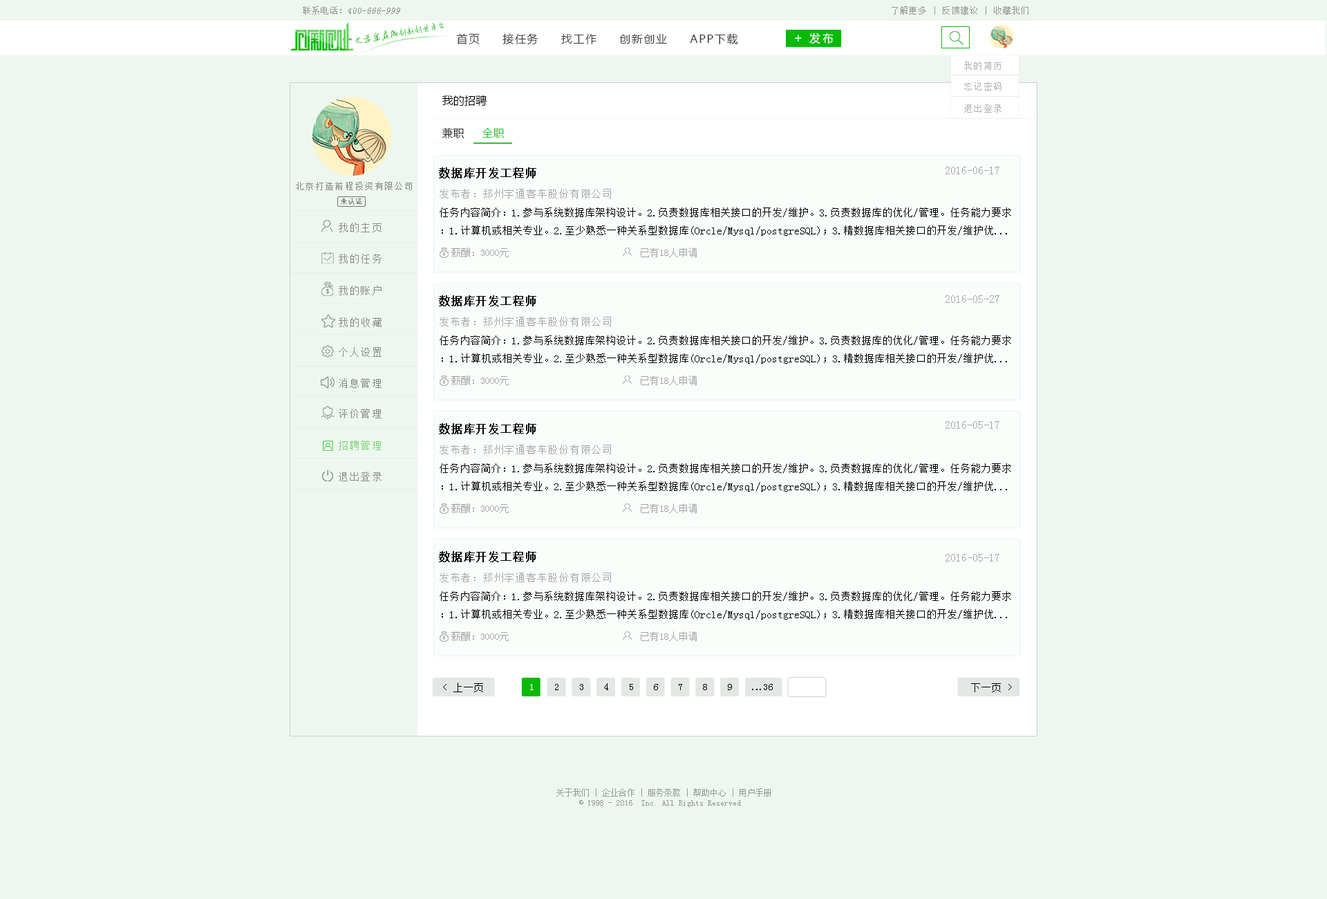
<style>
.page{position:relative;width:1327px;height:899px;background:#eef6f0}
.page>*{position:absolute;margin:0}
.t1{font:9.2px "SimSun";color:#959595;font-style:italic}
.t2{font:9.2px "SimSun";color:#959595}
.t3{font:8.3px "SimSun";letter-spacing:0.1em;color:#959494}
.t4{font:8.6px "AnJingCheng-Xing-2.0";letter-spacing:-0.01em;color:#09ba08}
.t5{font:9.6px "AnJingCheng-Xing-2.0";letter-spacing:-0.01em;color:#09ba08}
.t6{font:11.1px "MicrosoftYaHei";letter-spacing:0.1em;color:#3e3e3e}
.t7{font:12.9px "MicrosoftYaHei";letter-spacing:0.2em;color:#ffffff}
.t8{font:11.1px "MicrosoftYaHei";letter-spacing:0.2em;color:#ffffff}
.t9{font:9.2px "SimSun";letter-spacing:0.1em;color:#b2b2b2}
.t10{font:11.1px "MicrosoftYaHei";letter-spacing:0.01em;color:#000000}
.t11{font:11.1px "MicrosoftYaHei";letter-spacing:0.01em;color:#2f2f2f}
.t12{font:11.1px "MicrosoftYaHei";letter-spacing:0.01em;color:#33c132}
.t13{font:11.1px "SimSun";letter-spacing:0.05em;color:#030303;font-weight:bold}
.t14{font:11.1px "SimSun";color:#a4a4a4}
.t15{font:9.2px "SimSun";letter-spacing:0.1em;color:#888888}
.t16{font:7.4px "SimSun";color:#727472}
.t17{font:10.1px "SimSun";letter-spacing:0.05em;color:#a4a4a4}
.t18{font:10.1px "SimSun";color:#000000}
.t19{font:10.1px "SimSun";letter-spacing:0.1em;color:#888888}
.t20{font:9.7px "SimSun";color:#a4a4a4}
.t21{font:10.1px "SimSun";letter-spacing:0.1em;color:#7bd57b}
.t22{font:10px "SimSun";letter-spacing:0.05em;color:#000000}
.t23{font:10px "SimSun";letter-spacing:0.05em;color:#ffffff}
.t24{font:10px "SimSun";letter-spacing:-0.1em;color:#000000}
.t25{font:8.3px "SimSun";color:#999999}
</style>
<div class="page">
<p class="t1" style="left:303px;top:6px;width:97px;height:9px"><span class="t2">联系电话：</span>400-666-999</p>
<p class="t3" style="left:892px;top:6px;width:136px;height:9px">了解更多 | 反馈建议 | 收藏我们</p>
<p class="t4" style="left:355px;top:21px;width:89px;height:23px;rotate:-10deg"><span class="t5">大学生在线</span>创新创业平台</p>
<p class="t6" style="left:456px;top:33px;width:282px;height:12px">首页     接任务     找工作     创新创业     APP下载</p>
<p class="t7" style="left:795px;top:35px;width:7px;height:6px">+</p>
<p class="t8" style="left:809px;top:32px;width:25px;height:12px">发布</p>
<p class="t9" style="left:964px;top:62px;width:38px;height:8px">我的简历</p>
<p class="t9" style="left:964px;top:82px;width:38px;height:9px">忘记密码</p>
<p class="t10" style="left:442px;top:95px;width:45px;height:11px">我的招聘</p>
<p class="t9" style="left:964px;top:104px;width:38px;height:9px">退出登录</p>
<p class="t11" style="left:442px;top:127px;width:63px;height:12px">兼职    <span class="t12"> 全职</span></p>
<p class="t13" style="left:439px;top:167px;width:97px;height:11px">数据库开发工程师</p>
<p class="t14" style="left:946px;top:167px;width:53px;height:7px">2016-06-17</p>
<p class="t15" style="left:296px;top:182px;width:116px;height:8px">北京打造前程投资有限公司</p>
<p class="t16" style="left:341px;top:198px;width:21px;height:7px">未认证</p>
<p class="t17" style="left:440px;top:189px;width:171px;height:9px">发布者：郑州宇通客车股份有限公司</p>
<p class="t18" style="left:440px;top:207px;width:571px;height:29px">任务内容简介：1.参与系统数据库架构设计。2.负责数据库相关接口的开发/维护。3.负责数据库的优化/管理。任务能力要求<br>：1.计算机或相关专业。2.至少熟悉一种关系型数据库(Orcle/Mysql/postgreSQL)；3.精数据库相关接口的开发/维护优...</p>
<p class="t19" style="left:339px;top:223px;width:43px;height:9px">我的主页</p>
<p class="t19" style="left:339px;top:254px;width:43px;height:9px">我的任务</p>
<p class="t20" style="left:451px;top:247px;width:246px;height:10px">薪酬：3000元                           已有18人申请</p>
<p class="t19" style="left:339px;top:285px;width:43px;height:10px">我的账户</p>
<p class="t13" style="left:439px;top:295px;width:97px;height:11px">数据库开发工程师</p>
<p class="t14" style="left:946px;top:295px;width:53px;height:8px">2016-05-27</p>
<p class="t19" style="left:339px;top:317px;width:43px;height:10px">我的收藏</p>
<p class="t17" style="left:440px;top:317px;width:171px;height:9px">发布者：郑州宇通客车股份有限公司</p>
<p class="t18" style="left:440px;top:335px;width:571px;height:29px">任务内容简介：1.参与系统数据库架构设计。2.负责数据库相关接口的开发/维护。3.负责数据库的优化/管理。任务能力要求<br>：1.计算机或相关专业。2.至少熟悉一种关系型数据库(Orcle/Mysql/postgreSQL)；3.精数据库相关接口的开发/维护优...</p>
<p class="t19" style="left:339px;top:347px;width:43px;height:10px">个人设置</p>
<p class="t20" style="left:451px;top:375px;width:246px;height:10px">薪酬：3000元                           已有18人申请</p>
<p class="t19" style="left:339px;top:378px;width:43px;height:10px">消息管理</p>
<p class="t19" style="left:339px;top:408px;width:43px;height:10px">评价管理</p>
<p class="t13" style="left:439px;top:423px;width:97px;height:11px">数据库开发工程师</p>
<p class="t14" style="left:946px;top:421px;width:53px;height:8px">2016-05-17</p>
<p class="t21" style="left:339px;top:440px;width:43px;height:10px">招聘管理</p>
<p class="t17" style="left:440px;top:444px;width:171px;height:10px">发布者：郑州宇通客车股份有限公司</p>
<p class="t19" style="left:339px;top:471px;width:43px;height:10px">退出登录</p>
<p class="t18" style="left:440px;top:463px;width:571px;height:28px">任务内容简介：1.参与系统数据库架构设计。2.负责数据库相关接口的开发/维护。3.负责数据库的优化/管理。任务能力要求<br>：1.计算机或相关专业。2.至少熟悉一种关系型数据库(Orcle/Mysql/postgreSQL)；3.精数据库相关接口的开发/维护优...</p>
<p class="t20" style="left:451px;top:503px;width:246px;height:10px">薪酬：3000元                           已有18人申请</p>
<p class="t13" style="left:439px;top:551px;width:97px;height:11px">数据库开发工程师</p>
<p class="t14" style="left:946px;top:554px;width:53px;height:7px">2016-05-17</p>
<p class="t17" style="left:440px;top:572px;width:171px;height:10px">发布者：郑州宇通客车股份有限公司</p>
<p class="t18" style="left:440px;top:591px;width:571px;height:28px">任务内容简介：1.参与系统数据库架构设计。2.负责数据库相关接口的开发/维护。3.负责数据库的优化/管理。任务能力要求<br>：1.计算机或相关专业。2.至少熟悉一种关系型数据库(Orcle/Mysql/postgreSQL)；3.精数据库相关接口的开发/维护优...</p>
<p class="t20" style="left:451px;top:631px;width:246px;height:10px">薪酬：3000元                           已有18人申请</p>
<p class="t22" style="left:443px;top:682px;width:40px;height:10px">&lt; 上一页</p>
<p class="t23" style="left:530px;top:684px;width:4px;height:6px">1</p>
<p class="t22" style="left:555px;top:684px;width:3px;height:6px">2</p>
<p class="t22" style="left:580px;top:684px;width:3px;height:6px">3</p>
<p class="t22" style="left:604px;top:683px;width:4px;height:7px">4</p>
<p class="t22" style="left:630px;top:684px;width:3px;height:6px">5</p>
<p class="t22" style="left:654px;top:684px;width:4px;height:6px">6</p>
<p class="t22" style="left:679px;top:684px;width:3px;height:6px">7</p>
<p class="t22" style="left:703px;top:684px;width:4px;height:6px">8</p>
<p class="t22" style="left:728px;top:684px;width:4px;height:6px">9</p>
<p class="t24" style="left:752px;top:684px;width:21px;height:6px">...<span class="t22">36</span></p>
<p class="t22" style="left:971px;top:683px;width:41px;height:9px">下一页 &gt;</p>
<p class="t25" style="left:556px;top:788px;width:215px;height:19px;text-align:center">关于我们 | 企业合作 | 服务条款 | 帮助中心 | 用户手册<br>© 1998 - 2016  Inc. All Rights Reserved</p>
</div>
